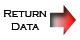
<style>
.page{position:relative;width:80px;height:40px;background:#ffffff}
.page>*{position:absolute;margin:0}
.t1{font:11px "CopperplateGothic-Light";color:#060808}
</style>
<div class="page">
<p class="t1" style="left:3px;top:10px;width:44px;height:20px;text-align:center">Return<br>Data</p>
</div>
